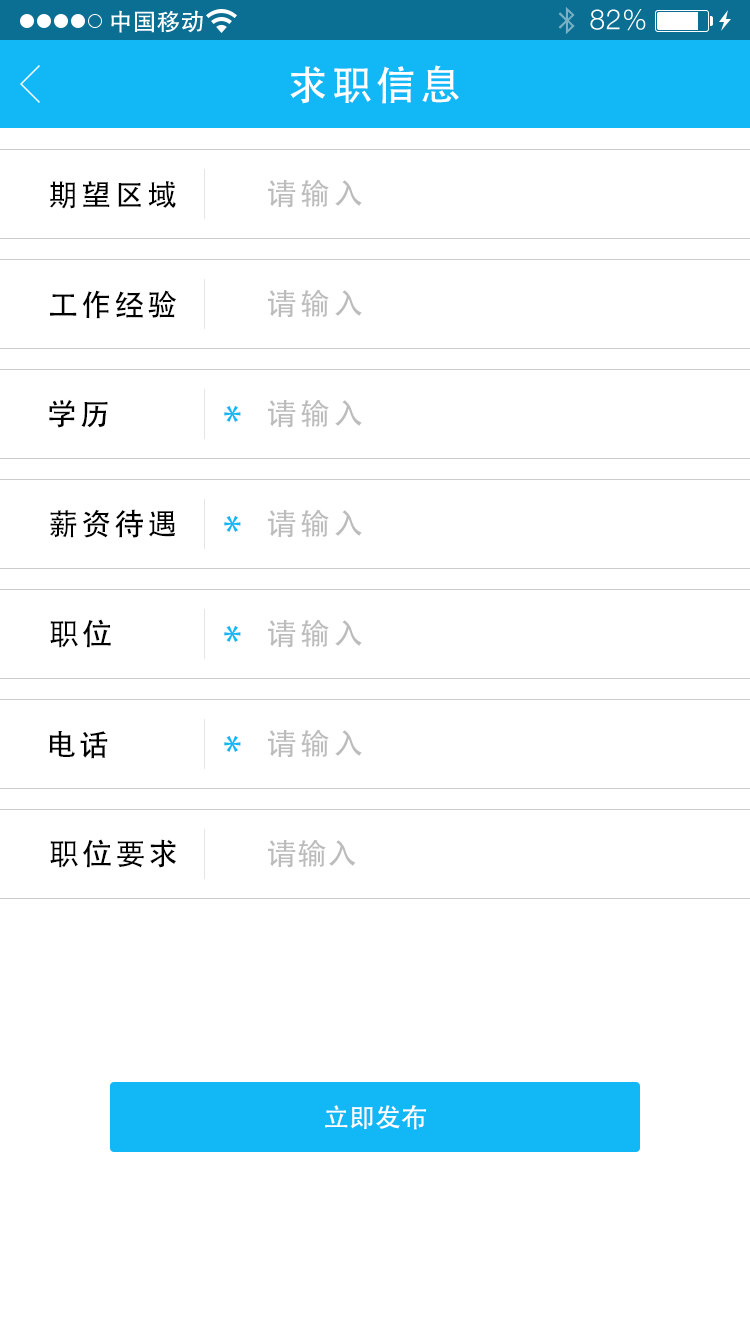
<style>
.page{position:relative;width:750px;height:1334px;background:#ffffff}
.page>*{position:absolute;margin:0}
.t1{font:40px "AdobeHeitiStd-Regular";letter-spacing:0.104em;color:#ffffff}
.t2{font:30px "AdobeHeitiStd-Regular";letter-spacing:0.104em;color:#000000}
.t3{font:30px "AdobeHeitiStd-Regular";letter-spacing:0.104em;color:#bcbcbc}
.t4{font:30px "AdobeHeitiStd-Regular";letter-spacing:0.104em;color:#010101}
.t5{font:40px "AdobeHeitiStd-Regular";letter-spacing:0.104em;color:#12b8f6}
.t6{font:30px "AdobeHeitiStd-Regular";color:#bcbcbc}
.t7{font:26px "AdobeHeitiStd-Regular";color:#ffffff}
</style>
<div class="page">
<p class="t1" style="left:290px;top:65px;width:169px;height:39px">求职信息</p>
<p class="t2" style="left:49px;top:181px;width:127px;height:28px">期望区域</p>
<p class="t3" style="left:268px;top:179px;width:94px;height:29px">请输入</p>
<p class="t4" style="left:50px;top:290px;width:127px;height:29px">工作经验</p>
<p class="t3" style="left:268px;top:289px;width:94px;height:29px">请输入</p>
<p class="t2" style="left:49px;top:399px;width:59px;height:29px">学历</p>
<p class="t3" style="left:268px;top:399px;width:94px;height:29px">请输入</p>
<p class="t5" style="left:224px;top:405px;width:17px;height:17px">*</p>
<p class="t2" style="left:50px;top:509px;width:126px;height:29px">薪资待遇</p>
<p class="t3" style="left:268px;top:509px;width:94px;height:29px">请输入</p>
<p class="t5" style="left:224px;top:515px;width:17px;height:17px">*</p>
<p class="t2" style="left:50px;top:619px;width:61px;height:29px">职位</p>
<p class="t5" style="left:224px;top:625px;width:17px;height:17px">*</p>
<p class="t3" style="left:268px;top:619px;width:94px;height:29px">请输入</p>
<p class="t2" style="left:49px;top:730px;width:59px;height:29px">电话</p>
<p class="t5" style="left:224px;top:735px;width:17px;height:17px">*</p>
<p class="t3" style="left:268px;top:729px;width:94px;height:29px">请输入</p>
<p class="t2" style="left:50px;top:839px;width:126px;height:29px">职位要求</p>
<p class="t6" style="left:268px;top:839px;width:88px;height:29px">请输入</p>
<p class="t7" style="left:325px;top:1105px;width:101px;height:25px">立即发布</p>
</div>
